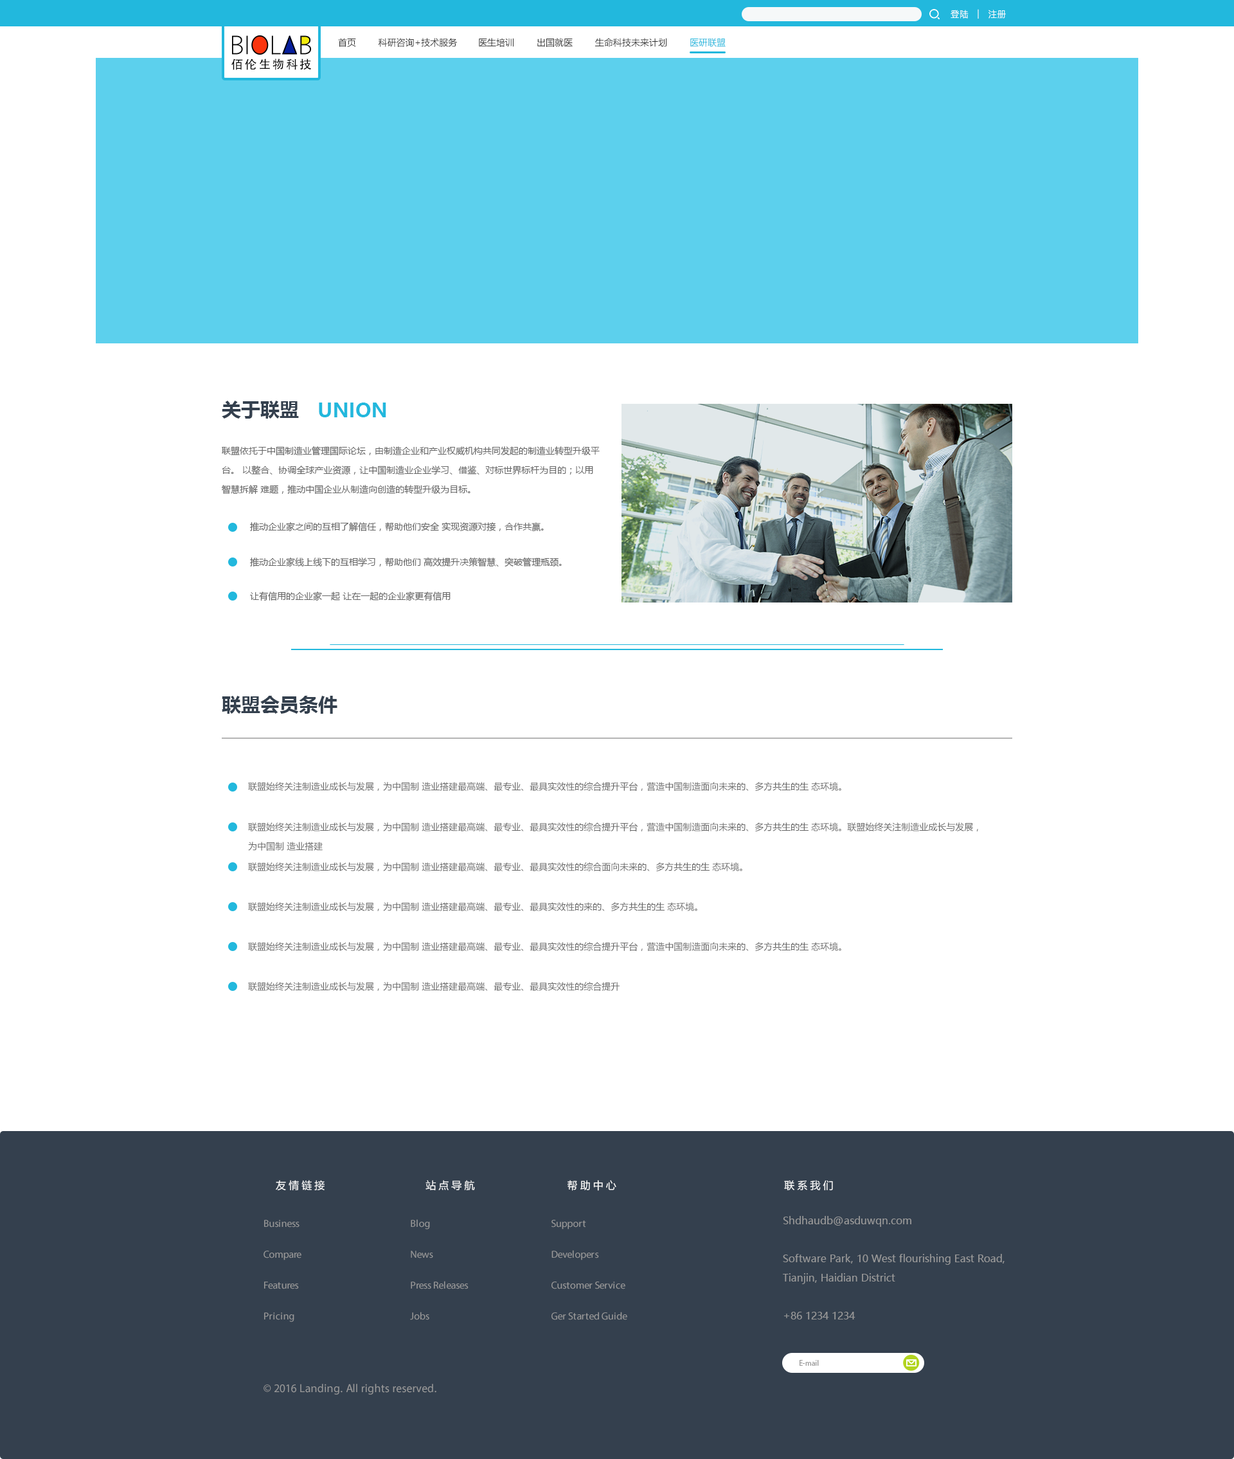
<style>
.page{position:relative;width:1234px;height:1459px;background:#ffffff}
.page>*{position:absolute;margin:0}
.t1{font:9px "PingFang-SC-Regular";color:#ffffff}
.t2{font:9px "MicrosoftYaHei";color:#333333}
.t3{font:9px "MicrosoftYaHei";color:#22b8dd}
.t4{font:12px "AdobeHeitiStd-Regular";letter-spacing:0.15em;color:#000000}
.t5{font:19.3px "MicrosoftYaHei-Bold";color:#34404e}
.t6{font:19.3px "MicrosoftYaHei-Bold";color:#22b8dd;text-transform:uppercase}
.t7{font:9px/19.3px "MicrosoftYaHei";color:#666666}
.t8{font:9px "MicrosoftYaHei";color:#666666}
.t9{font:10.3px "MicrosoftYaHei";letter-spacing:0.24em;color:#ffffff;text-transform:uppercase}
.t10{font:10.3px "MicrosoftYaHei";color:#999999}
.t11{font:10.3px/30.9px "MyriadPro-Regular";color:#999999}
.t12{font:10.3px/19.3px "MicrosoftYaHei";color:#999999}
.t13{font:7.7px "MyriadPro-Regular";color:#999999}
.t14{font:11.6px "MyriadPro-Regular";color:#999999}
</style>
<div class="page">
<p class="t1" style="left:951px;top:9px;width:55px;height:10px">登陆   |   注册</p>
<p class="t2" style="left:338px;top:38px;width:18px;height:9px">首页</p>
<p class="t2" style="left:378px;top:38px;width:80px;height:9px">科研咨询+技术服务</p>
<p class="t2" style="left:479px;top:38px;width:35px;height:9px">医生培训</p>
<p class="t2" style="left:537px;top:38px;width:36px;height:9px">出国就医</p>
<p class="t2" style="left:595px;top:38px;width:72px;height:9px">生命科技未来计划</p>
<p class="t3" style="left:690px;top:38px;width:36px;height:9px">医研联盟</p>
<p class="t4" style="left:231px;top:59px;width:80px;height:11px">佰伦生物科技</p>
<p class="t5" style="left:222px;top:401px;width:77px;height:18px">关于联盟</p>
<p class="t6" style="left:319px;top:402px;width:67px;height:15px">union</p>
<p class="t7" style="left:222px;top:446px;width:378px;height:48px">联盟依托于中国制造业管理国际论坛，由制造企业和产业权威机构共同发起的制造业转型升级平台。 以整合、协调全球产业资源，让中国制造业企业学习、借鉴、对标世界标杆为目的；以用智慧拆解 难题，推动中国企业从制造向创造的转型升级为目标。</p>
<p class="t8" style="left:250px;top:522px;width:294px;height:10px">推动企业家之间的互相了解信任，帮助他们安全 实现资源对接，合作共赢。</p>
<p class="t8" style="left:250px;top:557px;width:312px;height:10px">推动企业家线上线下的互相学习，帮助他们 高效提升决策智慧、突破管理瓶颈。</p>
<p class="t8" style="left:250px;top:591px;width:201px;height:10px">让有信用的企业家一起 让在一起的企业家更有信用</p>
<p class="t5" style="left:222px;top:696px;width:116px;height:18px">联盟会员条件</p>
<p class="t8" style="left:248px;top:782px;width:594px;height:9px">联盟始终关注制造业成长与发展，为中国制 造业搭建最高端、最专业、最具实效性的综合提升平台，营造中国制造面向未来的、多方共生的生 态环境。</p>
<p class="t7" style="left:248px;top:822px;width:730px;height:29px">联盟始终关注制造业成长与发展，为中国制 造业搭建最高端、最专业、最具实效性的综合提升平台，营造中国制造面向未来的、多方共生的生 态环境。联盟始终关注制造业成长与发展，<br>为中国制 造业搭建</p>
<p class="t8" style="left:248px;top:862px;width:494px;height:9px">联盟始终关注制造业成长与发展，为中国制 造业搭建最高端、最专业、最具实效性的综合面向未来的、多方共生的生 态环境。</p>
<p class="t8" style="left:248px;top:902px;width:450px;height:9px">联盟始终关注制造业成长与发展，为中国制 造业搭建最高端、最专业、最具实效性的来的、多方共生的生 态环境。</p>
<p class="t8" style="left:248px;top:942px;width:594px;height:9px">联盟始终关注制造业成长与发展，为中国制 造业搭建最高端、最专业、最具实效性的综合提升平台，营造中国制造面向未来的、多方共生的生 态环境。</p>
<p class="t8" style="left:248px;top:982px;width:372px;height:9px">联盟始终关注制造业成长与发展，为中国制 造业搭建最高端、最专业、最具实效性的综合提升</p>
<p class="t9" style="left:276px;top:1180px;width:49px;height:11px">友情链接</p>
<p class="t9" style="left:426px;top:1180px;width:49px;height:11px">站点导航</p>
<p class="t9" style="left:568px;top:1180px;width:48px;height:11px">帮助中心</p>
<p class="t9" style="left:784px;top:1180px;width:49px;height:11px">联系我们</p>
<p class="t10" style="left:783px;top:1216px;width:129px;height:11px">Shdhaudb@asduwqn.com</p>
<p class="t11" style="left:264px;top:1220px;width:38px;height:102px">Business<br>Compare<br>Features<br>Pricing</p>
<p class="t11" style="left:410px;top:1219px;width:59px;height:101px">Blog<br>News<br>Press Releases<br>Jobs</p>
<p class="t11" style="left:552px;top:1220px;width:75px;height:100px">Support<br>Developers<br>Customer Service<br>Ger Started Guide</p>
<p class="t12" style="left:783px;top:1254px;width:222px;height:30px">Software Park, 10 West flourishing East Road, Tianjin, Haidian District</p>
<p class="t10" style="left:784px;top:1311px;width:72px;height:8px">+86 1234 1234</p>
<p class="t13" style="left:800px;top:1360px;width:19px;height:5px">E-mail</p>
<p class="t14" style="left:264px;top:1383px;width:173px;height:11px">© 2016 Landing. All rights reserved.</p>
</div>
